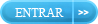
<style>
.page{position:relative;width:98px;height:24px}
.page>*{position:absolute;margin:0}
.t1{font:12px "TimesNewRomanPSMT";color:#ffffff}
.t2{font:9px "Arial-BoldMT";color:#ffffff}
</style>
<div class="page">
<p class="t1" style="left:15px;top:8px;width:49px;height:9px">ENTRAR</p>
<p class="t2" style="left:78px;top:9px;width:11px;height:6px">&gt;&gt;</p>
</div>
